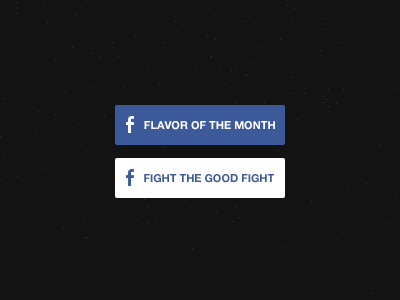
<style>
.page{position:relative;width:400px;height:300px;background:#131313}
.page>*{position:absolute;margin:0}
.t1{font:11px "HelveticaNeue-Bold";color:#ffffff;text-transform:uppercase}
.t2{font:11px "HelveticaNeue-Bold";color:#3c5a99;text-transform:uppercase}
</style>
<div class="page">
<p class="t1" style="left:144px;top:121px;width:131px;height:9px">FLAVOR OF THE MONTH</p>
<p class="t2" style="left:144px;top:174px;width:130px;height:9px">FIGHT THE GOOD FIGHT</p>
</div>
